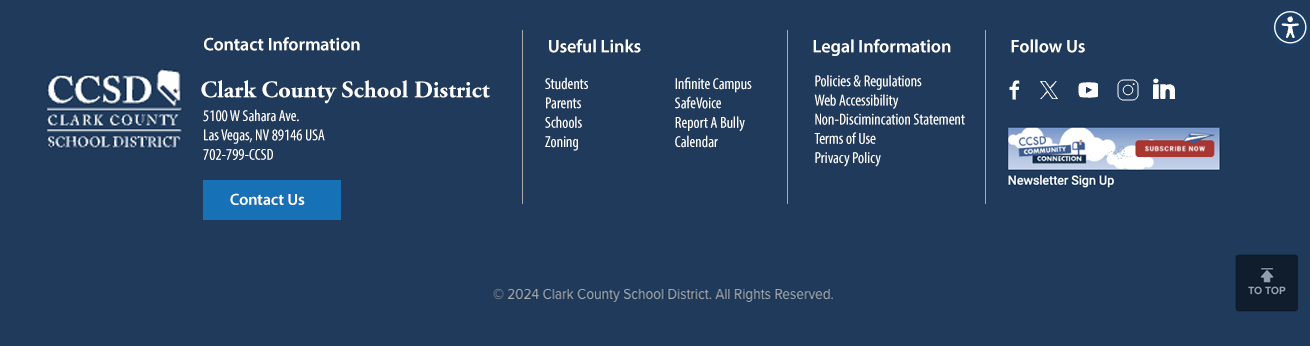
<style>
.page{position:relative;width:1310px;height:346px;background:#1f3a5a}
.page>*{position:absolute;margin:0}
.t1{font:18px "MyriadPro-Semibold";color:#ffffff}
.t2{font:16.1px "MyriadPro-Cond";color:#ffffff}
.t3{font:16px "MyriadPro-Cond";color:#ffffff}
.t4{font:24px "AGaramondPro-Bold";color:#ffffff}
.t5{font:16px "MyriadPro-Semibold";color:#ffffff}
</style>
<div class="page">
<p class="t1" style="left:204px;top:37px;width:156px;height:14px">Contact Information</p>
<p class="t1" style="left:549px;top:39px;width:92px;height:14px">Useful Links</p>
<p class="t1" style="left:813px;top:39px;width:138px;height:17px">Legal Information</p>
<p class="t1" style="left:1011px;top:39px;width:74px;height:14px">Follow Us</p>
<p class="t2" style="left:545px;top:77px;width:43px;height:74px">Students<br>Parents<br>Schools<br>Zoning</p>
<p class="t2" style="left:675px;top:77px;width:77px;height:71px">Infinite Campus<br>SafeVoice<br>Report A Bully<br>Calendar</p>
<p class="t3" style="left:814px;top:75px;width:151px;height:92px">Policies &amp; Regulations<br>Web Accessibility<br>Non-Discimincation Statement<br>Terms of Use<br>Privacy Policy</p>
<p class="t4" style="left:201px;top:80px;width:289px;height:24px">Clark County School District</p>
<p class="t2" style="left:203px;top:109px;width:122px;height:51px">5100 W Sahara Ave.<br>Las Vegas, NV 89146 USA<br>702-799-CCSD</p>
<p class="t5" style="left:230px;top:193px;width:75px;height:12px">Contact Us</p>
</div>
